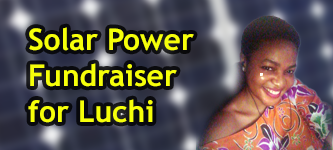
<style>
.page{position:relative;width:333px;height:150px}
.page>*{position:absolute;margin:0}
.t1{font:30px "TrebuchetMS-Bold";color:#f6ff0a}
</style>
<div class="page">
<p class="t1" style="left:28px;top:27px;width:166px;height:96px">Solar Power<br>Fundraiser<br>for Luchi</p>
</div>
